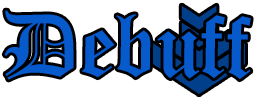
<style>
.page{position:relative;width:259px;height:100px;background:#ffffff}
.page>*{position:absolute;margin:0}
.t1{font:90px "OldEnglishTextMT";color:#065acc}
</style>
<div class="page">
<p class="t1" style="left:4px;top:10px;width:247px;height:70px;rotate:1deg">Debuff</p>
</div>
